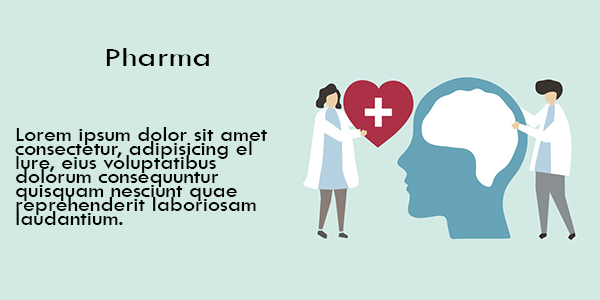
<style>
.page{position:relative;width:600px;height:300px;background:#d3eae4}
.page>*{position:absolute;margin:0}
.t1{font:28.4px "TwCenMT-Regular";color:#000000;scale:1.23 1}
.t2{font:20.8px/14px "TwCenMT-Regular";color:#000000;scale:1.14 1}
</style>
<div class="page">
<p class="t1" style="left:106px;top:48px;width:103px;height:18px">Pharma</p>
<p class="t2" style="left:15px;top:127px;width:252px;height:98px">Lorem ipsum dolor sit amet consectetur, adipisicing el Iure, eius voluptatibus dolorum consequuntur quisquam nesciunt quae reprehenderit laboriosam laudantium.</p>
</div>
